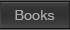
<style>
.page{position:relative;width:70px;height:30px}
.page>*{position:absolute;margin:0}
.t1{font:14px "HelveticaNeue";color:#aeacac}
</style>
<div class="page">
<p class="t1" style="left:15px;top:10px;width:40px;height:10px">Books</p>
</div>
